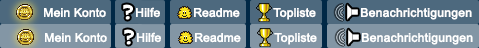
<style>
.page{position:relative;width:479px;height:48px;background:#8396a5}
.page>*{position:absolute;margin:0}
.t1{font:12px "ArialMT";letter-spacing:-0.003em;color:#ffffff;font-weight:bold}
.t2{font:12px "ArialMT";letter-spacing:-0.004em;color:#ffffff;font-weight:bold}
.t3{font:12px "ArialMT";color:#ffffff;font-weight:bold}
</style>
<div class="page">
<p class="t1" style="left:44px;top:8px;width:62px;height:10px">Mein Konto</p>
<p class="t2" style="left:136px;top:7px;width:24px;height:11px">Hilfe</p>
<p class="t1" style="left:194px;top:8px;width:46px;height:10px">Readme</p>
<p class="t1" style="left:273px;top:8px;width:43px;height:12px">Topliste</p>
<p class="t3" style="left:361px;top:8px;width:111px;height:12px">Benachrichtigungen</p>
<p class="t1" style="left:45px;top:33px;width:62px;height:10px">Mein Konto</p>
<p class="t2" style="left:137px;top:32px;width:24px;height:11px">Hilfe</p>
<p class="t1" style="left:195px;top:33px;width:46px;height:10px">Readme</p>
<p class="t1" style="left:274px;top:33px;width:43px;height:12px">Topliste</p>
<p class="t3" style="left:362px;top:33px;width:111px;height:12px">Benachrichtigungen</p>
</div>
